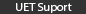
<style>
.page{position:relative;width:86px;height:14px;background:#333333}
.page>*{position:absolute;margin:0}
.t1{font:11.9px "MyriadPro-Regular";color:#ffffff}
</style>
<div class="page">
<p class="t1" style="left:16px;top:3px;width:56px;height:10px">UET Suport</p>
</div>
